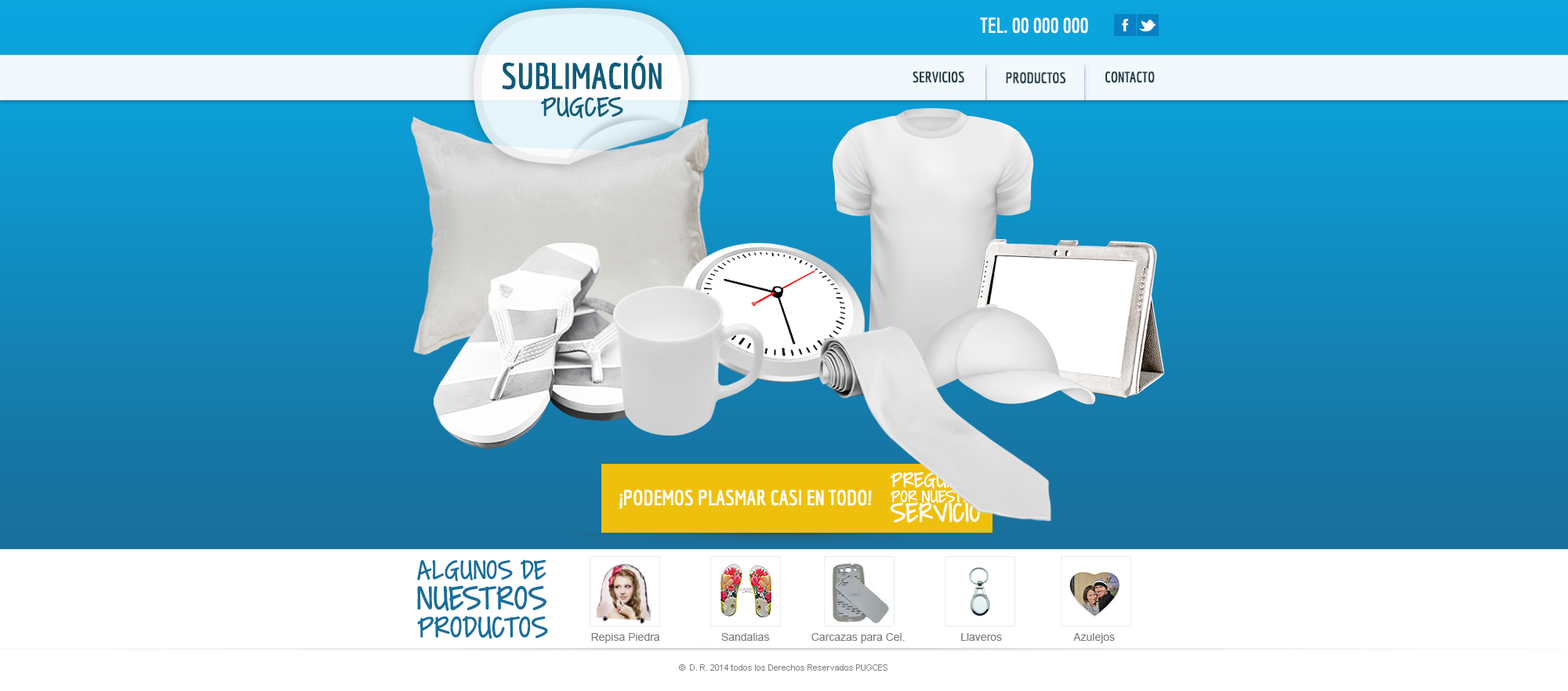
<style>
.page{position:relative;width:1568px;height:691px;background:#ffffff}
.page>*{position:absolute;margin:0}
.t1{font:20.9px "Economica-Bold";color:#ffffff}
.t2{font:36.1px "Economica-Bold";color:#0f5c79}
.t3{font:14.8px "Economica-Bold";color:#263f48}
.t4{font:30.4px "CoveredByYourGrace";color:#0f5c79}
.t5{font:19px/15.2px "CoveredByYourGrace";color:#ffffff}
.t6{font:23.3px/17.9px "CoveredByYourGrace";color:#ffffff}
.t7{font:30.4px/19.5px "CoveredByYourGrace";color:#ffffff}
.t8{font:30.1px "CoveredByYourGrace";color:#186f9c}
.t9{font:37.3px/30.3px "CoveredByYourGrace";color:#186f9c}
.t10{font:33.5px/28px "CoveredByYourGrace";color:#186f9c}
.t11{font:11px "ArialMT";color:#7f7f7d}
.t12{font:8.6px "ArialMT";color:#7f7f7d}
</style>
<div class="page">
<p class="t1" style="left:980px;top:17px;width:108px;height:17px">TEL. 00 000 000</p>
<p class="t2" style="left:503px;top:55px;width:159px;height:34px">SUBLIMACIÓN</p>
<p class="t3" style="left:913px;top:71px;width:51px;height:12px">SERVICIOS</p>
<p class="t3" style="left:1006px;top:72px;width:59px;height:12px">PRODUCTOS</p>
<p class="t3" style="left:1105px;top:71px;width:50px;height:12px">CONTACTO</p>
<p class="t4" style="left:541px;top:96px;width:82px;height:22px">PUGCES</p>
<p class="t5" style="left:890px;top:472px;width:90px;height:51px"><span class="t6">PREGUNTA <br></span>POR NUESTRO<br><span class="t7">SERVICIO</span></p>
<p class="t1" style="left:619px;top:490px;width:253px;height:20px">¡PODEMOS PLASMAR CASI EN TODO!</p>
<p class="t8" style="left:417px;top:560px;width:131px;height:80px">ALGUNOS DE <br><span class="t9">NUESTROS<br></span><span class="t10">PRODUCTOS</span></p>
<p class="t11" style="left:591px;top:633px;width:68px;height:11px">Repisa Piedra</p>
<p class="t11" style="left:721px;top:633px;width:49px;height:8px">Sandalias</p>
<p class="t11" style="left:811px;top:633px;width:94px;height:11px">Carcazas para Cel.</p>
<p class="t11" style="left:961px;top:633px;width:41px;height:8px">Llaveros</p>
<p class="t11" style="left:1073px;top:633px;width:42px;height:11px">Azulejos</p>
<p class="t12" style="left:679px;top:665px;width:208px;height:6px">©  D. R. 2014 todos los Derechos Reservados PUGCES</p>
</div>
